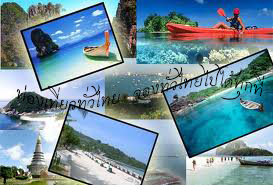
<style>
.page{position:relative;width:273px;height:185px}
.page>*{position:absolute;margin:0}
.t1{font:24px "THCharmonman";color:#000000}
</style>
<div class="page">
<p class="t1" style="left:17px;top:63px;width:248px;height:47px">ท่องเที่ยวทั่วไทย  จองทั่วไทยไปได้ทุกที่</p>
</div>
